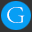
<style>
.page{position:relative;width:32px;height:32px;background:#079ef4}
.page>*{position:absolute;margin:0}
.t1{font:24.7px "AdobeSongStd-Light";color:#ffffff;scale:1.06 1}
</style>
<div class="page">
<p class="t1" style="left:7px;top:7px;width:18px;height:16px">G</p>
</div>
